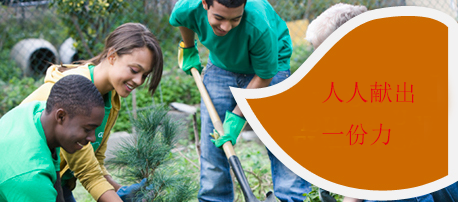
<style>
.page{position:relative;width:458px;height:202px;background:#cc6901}
.page>*{position:absolute;margin:0}
.t1{font:24px "SimSun";color:#e60012}
</style>
<div class="page">
<p class="t1" style="left:322px;top:81px;width:92px;height:65px">人人献出<br>一份力</p>
</div>
